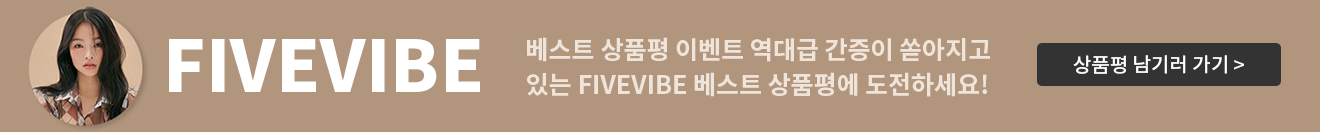
<style>
.page{position:relative;width:1320px;height:132px;background:#b1957d}
.page>*{position:absolute;margin:0}
.t1{font:70.7px "NotoSansCJKkr-Black";color:#ffffff;text-transform:uppercase}
.t2{font:25px/35px "NotoSansCJKkr-Bold";color:#efe4da;text-transform:uppercase}
.t3{font:20px "NotoSansCJKkr-Medium";color:#ffffff;text-transform:uppercase}
</style>
<div class="page">
<p class="t1" style="left:169px;top:39px;width:311px;height:53px">fivevibe</p>
<p class="t2" style="left:527px;top:37px;width:463px;height:60px">베스트 상품평 이벤트 역대급 간증이 쏟아지고 <br>있는 FIVEVIBE 베스트 상품평에 도전하세요!</p>
<p class="t3" style="left:1073px;top:55px;width:171px;height:19px">상품평 남기러 가기 &gt;</p>
</div>
